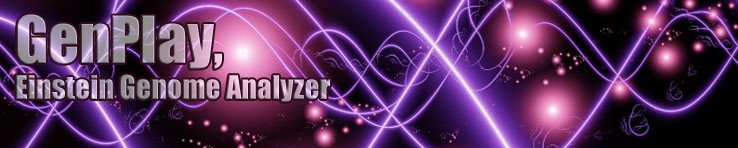
<style>
.page{position:relative;width:738px;height:148px}
.page>*{position:absolute;margin:0}
.t1{font:30px "Impact"}
.t2{font:60px "Impact"}
</style>
<div class="page">
<p class="t1" style="left:16px;top:14px;width:314px;height:88px"><span class="t2">GenPlay, <br></span>Einstein Genome Analyzer</p>
</div>
